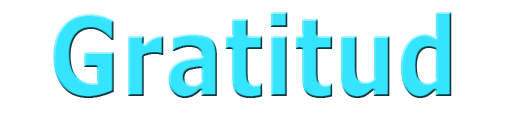
<style>
.page{position:relative;width:512px;height:128px;background:#ffffff}
.page>*{position:absolute;margin:0}
.t1{font:109.7px "Verdana-Bold";color:#35e4fe;scale:0.81 1}
</style>
<div class="page">
<p class="t1" style="left:53px;top:12px;width:399px;height:86px">Gratitud</p>
</div>
